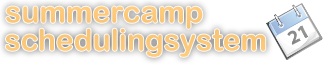
<style>
.page{position:relative;width:323px;height:65px;background:#ffffff}
.page>*{position:absolute;margin:0}
.t1{font:30px "ArialRoundedMTBold";color:#ffcb7c}
</style>
<div class="page">
<p class="t1" style="left:6px;top:6px;width:197px;height:23px">summercamp</p>
<p class="t1" style="left:5px;top:28px;width:261px;height:29px">schedulingsystem</p>
</div>
